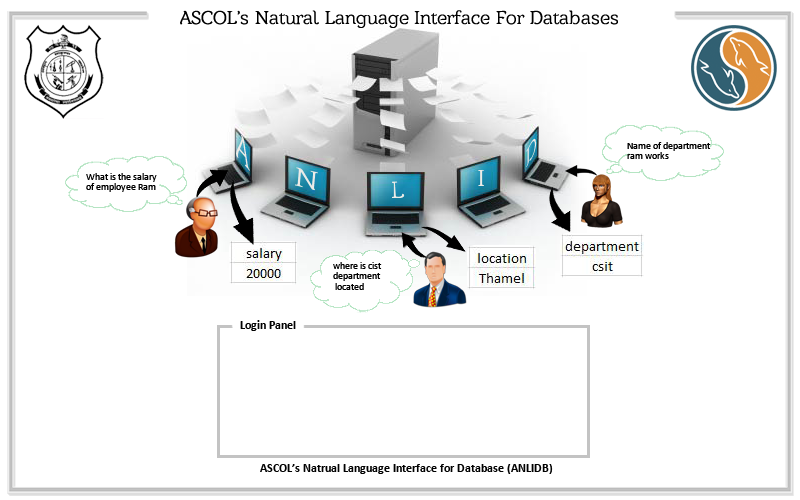
<style>
.page{position:relative;width:800px;height:500px;background:#ffffff}
.page>*{position:absolute;margin:0}
.t1{font:19px "Barkentina";color:#010101}
.t2{font:37.4px "Barkentina";color:#ebebe7;scale:0.89 1}
.t3{font:24px "Barkentina";color:#ebebe7;scale:1.29 1}
.t4{font:10px/10.4px "Calibri";color:#010101}
.t5{font:26.5px "Barkentina";color:#ebebe7;scale:1.23 1}
.t6{font:24px "Barkentina";color:#ebebe7}
.t7{font:12px "Calibri-Bold";color:#010101}
</style>
<div class="page">
<p class="t1" style="left:180px;top:10px;width:229px;height:18px">ASCOL’s Natural Language</p>
<p class="t1" style="left:414px;top:10px;width:204px;height:15px">Interface For Databases</p>
<p class="t2" style="left:236px;top:135px;width:14px;height:36px;rotate:49deg">A</p>
<p class="t3" style="left:526px;top:138px;width:11px;height:30px;rotate:-60deg">D</p>
<p class="t4" style="left:627px;top:142px;width:84px;height:17px">Name of department<br>ram works</p>
<p class="t4" style="left:86px;top:173px;width:71px;height:19px">What is the salary <br>of employee Ram</p>
<p class="t5" style="left:295px;top:167px;width:23px;height:24px;rotate:14deg">N</p>
<p class="t6" style="left:478px;top:170px;width:6px;height:16px">I</p>
<p class="t6" style="left:392px;top:181px;width:13px;height:17px">L</p>
<p class="t4" style="left:333px;top:262px;width:49px;height:28px">where is cist <br>department<br> located</p>
<p class="t7" style="left:240px;top:320px;width:56px;height:11px">Login Panel</p>
<p class="t7" style="left:260px;top:464px;width:293px;height:10px">ASCOL’s Natrual Language Interface for Database (ANLIDB)</p>
</div>
